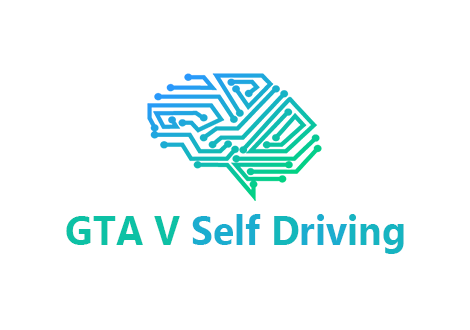
<style>
.page{position:relative;width:470px;height:330px;background:#ffffff}
.page>*{position:absolute;margin:0}
.t1{font:40.6px "MicrosoftNewTaiLue-Bold";color:#0dc1a6;scale:0.96 1}
.t2{font:40.6px "MicrosoftNewTaiLue-Bold";color:#1badcf;scale:0.96 1}
.t3{font:40.6px "MicrosoftNewTaiLue-Bold";color:#14b7bb;scale:0.96 1}
.t4{font:40.6px "MicrosoftNewTaiLue-Bold";color:#16b4c1;scale:0.96 1}
</style>
<div class="page">
<p class="t1" style="left:66px;top:214px;width:338px;height:40px">GTA V <span class="t2">Self </span><span class="t3">D</span><span class="t2">riv</span><span class="t4">ing</span></p>
</div>
